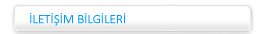
<style>
.page{position:relative;width:259px;height:34px;background:#ffffff}
.page>*{position:absolute;margin:0}
.t1{font:13px "Calibri";color:#0099ff}
</style>
<div class="page">
<p class="t1" style="left:30px;top:13px;width:96px;height:13px">İLETİŞİM BİLGİLERİ</p>
</div>
